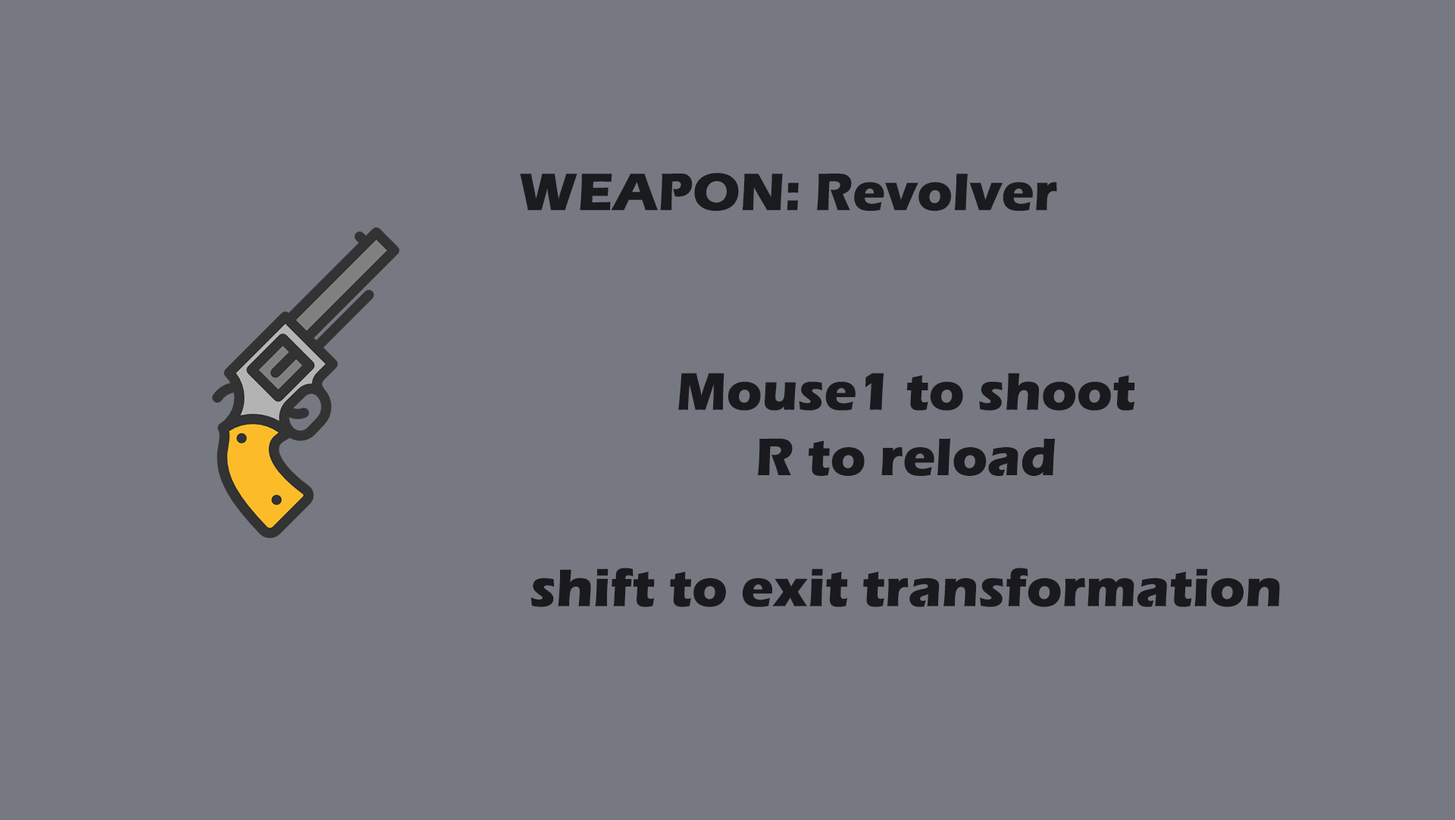
<style>
.page{position:relative;width:1455px;height:820px;background:#777982}
.page>*{position:absolute;margin:0}
.t1{font:54.5px "ErasITC-Bold";color:#1a1b1e}
.t2{font:54.5px "ErasITC-Bold";color:#1a1a1e}
</style>
<div class="page">
<p class="t1" style="left:520px;top:173px;width:537px;height:38px">WEAPON: Revolver</p>
<p class="t2" style="left:530px;top:373px;width:750px;height:234px;text-align:center">Mouse1 to shoot<br>R to reload<br><br>shift to exit transformation</p>
</div>
